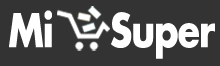
<style>
.page{position:relative;width:220px;height:66px;background:#333333}
.page>*{position:absolute;margin:0}
.t1{font:45px "FuturaLT-Bold";letter-spacing:-0.025em;color:#ffffff;scale:0.8 1}
</style>
<div class="page">
<p class="t1" style="left:9px;top:10px;width:206px;height:49px">Mi     Super</p>
</div>
